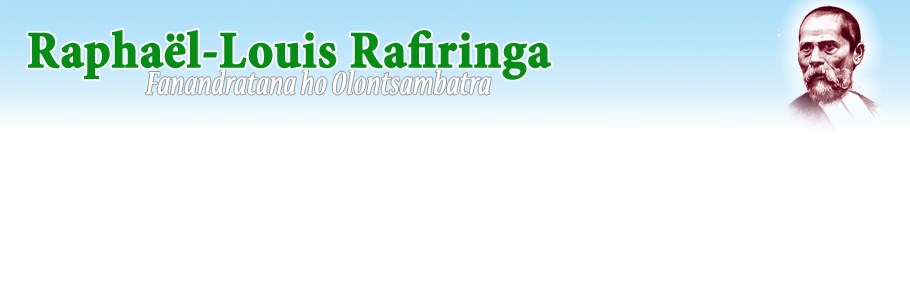
<style>
.page{position:relative;width:910px;height:300px;background:#ffffff}
.page>*{position:absolute;margin:0}
.t1{font:52px "MinionPro-BoldCn";color:#088c18;font-weight:bold}
.t2{font:35.2px "NuevaStd-CondItalic";color:#ffffff;font-weight:bold}
</style>
<div class="page">
<p class="t1" style="left:27px;top:24px;width:525px;height:62px">Raphaël-Louis Rafiringa</p>
<p class="t2" style="left:146px;top:64px;width:345px;height:38px">Fanandratana ho Olontsambatra</p>
</div>
